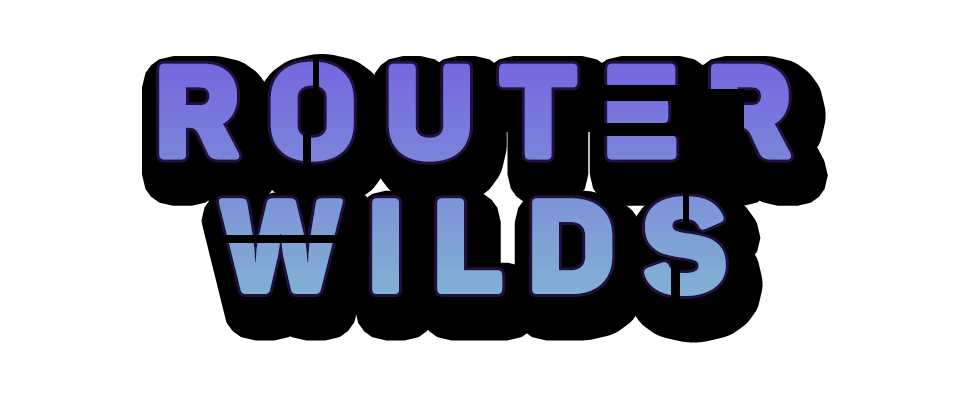
<style>
.page{position:relative;width:960px;height:400px;background:#ffffff}
.page>*{position:absolute;margin:0}
.t1{font:134.6px/134.6px "Panton-Trial-Black"}
</style>
<div class="page">
<p class="t1" style="left:159px;top:61px;width:632px;height:235px;text-align:center">R O U T E R <br>W I L D S</p>
</div>
